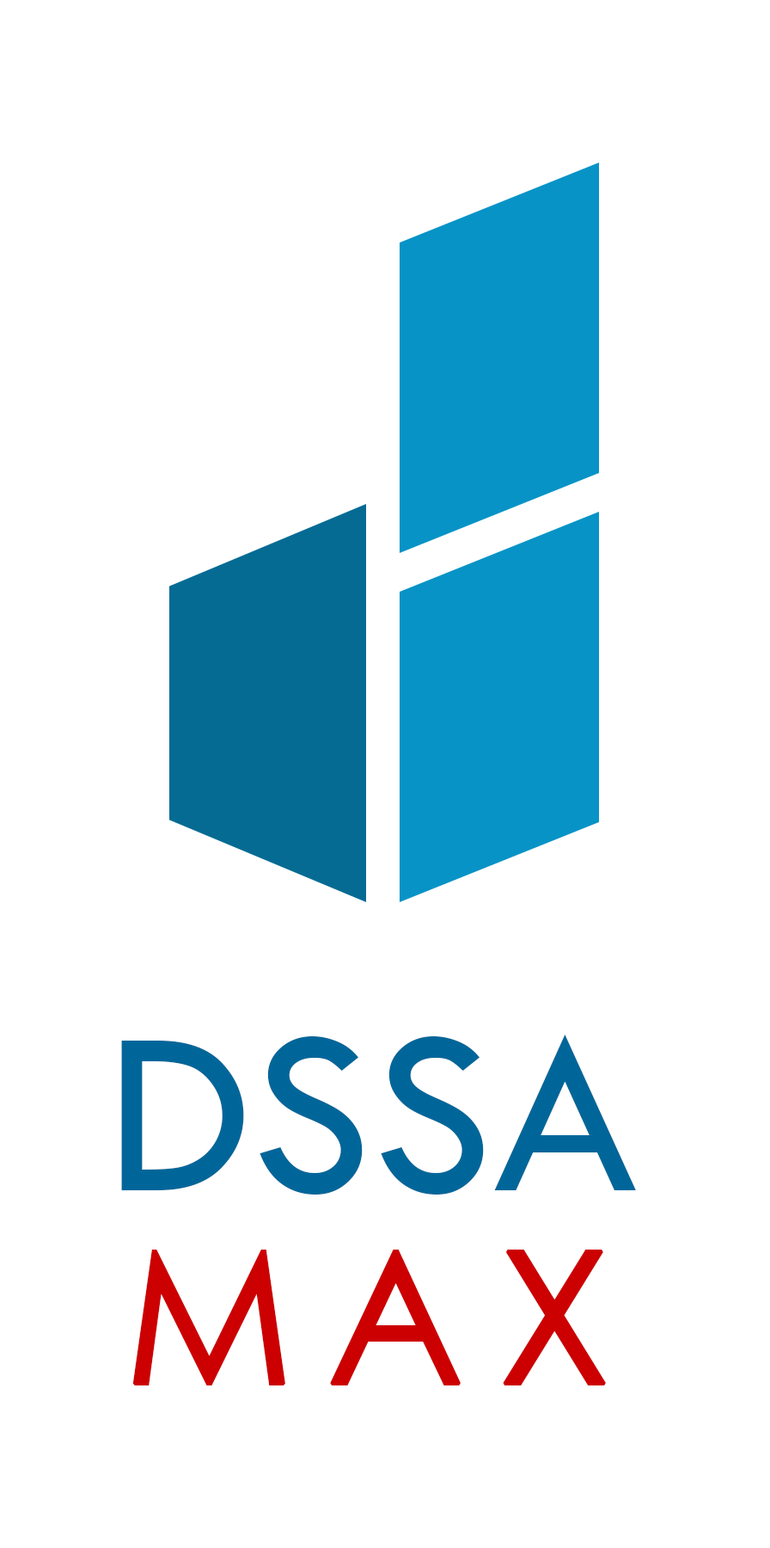
<style>
.page{position:relative;width:770px;height:1548px;background:#ffffff}
.page>*{position:absolute;margin:0}
.t1{font:241.1px "TwCenMT-Regular";color:#006699}
.t2{font:183.7px "CenturyGothic";letter-spacing:0.16em;color:#cc0000;text-transform:uppercase;font-weight:bold}
</style>
<div class="page">
<p class="t1" style="left:121px;top:1034px;width:515px;height:160px">DSSA</p>
<p class="t2" style="left:132px;top:1249px;width:474px;height:136px">max</p>
</div>
